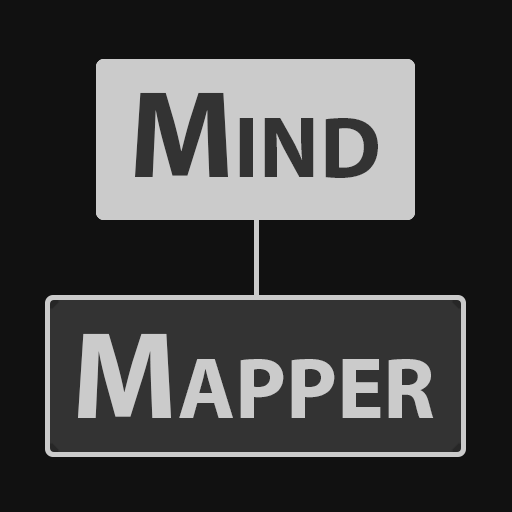
<style>
.page{position:relative;width:512px;height:512px;background:#111111}
.page>*{position:absolute;margin:0}
.t1{font:125px "MyriadPro-Bold";color:#333333;font-variant:small-caps}
.t2{font:125px "MyriadPro-Bold";color:#cccccc;font-variant:small-caps}
</style>
<div class="page">
<p class="t1" style="left:135px;top:92px;width:243px;height:86px">Mind</p>
<p class="t2" style="left:78px;top:333px;width:356px;height:85px">Mapper</p>
</div>
